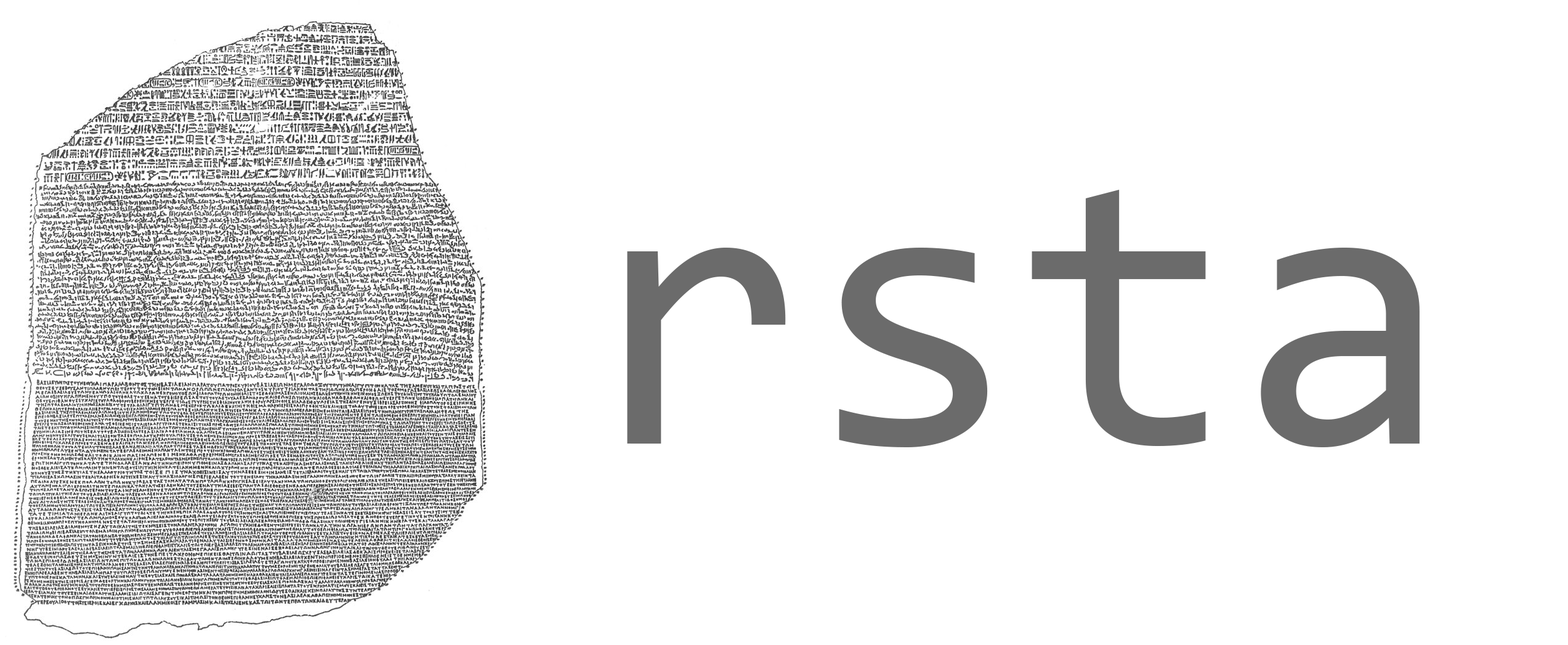
<style>
.page{position:relative;width:1568px;height:645px;background:#ffffff}
.page>*{position:absolute;margin:0}
.t1{font:392.3px "Consolas";color:#6b6b6b}
</style>
<div class="page">
<p class="t1" style="left:627px;top:190px;width:793px;height:257px">rsta</p>
</div>
